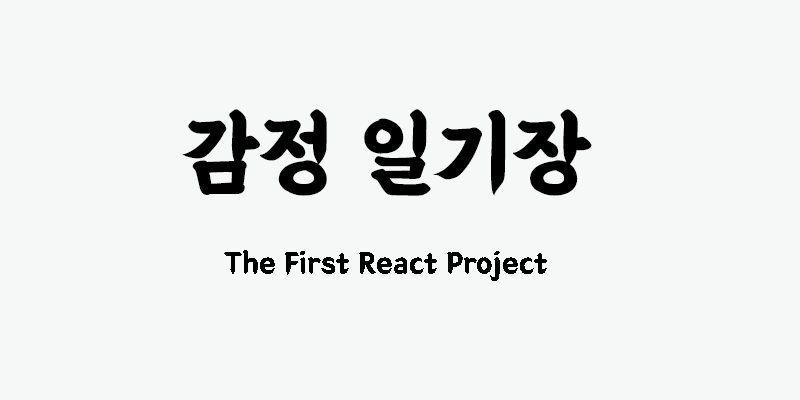
<style>
.page{position:relative;width:800px;height:400px;background:#f6f7f7}
.page>*{position:absolute;margin:0}
.t1{font:95px "BMEULJIROTTF";color:#000000}
.t2{font:30px "BMEULJIROTTF";color:#000000}
</style>
<div class="page">
<p class="t1" style="left:182px;top:109px;width:410px;height:87px">감정 일기장</p>
<p class="t2" style="left:224px;top:250px;width:323px;height:31px">The First React Project</p>
</div>
